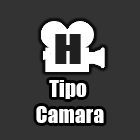
<style>
.page{position:relative;width:140px;height:140px;background:#333333}
.page>*{position:absolute;margin:0}
.t1{font:38.5px "Impact";color:#1f1f1f;scale:1.41 1}
.t2{font:21.5px "Impact";color:#ffffff}
</style>
<div class="page">
<p class="t1" style="left:55px;top:34px;width:26px;height:30px">H</p>
<p class="t2" style="left:36px;top:80px;width:68px;height:43px;text-align:center">Tipo <br>Camara</p>
</div>
